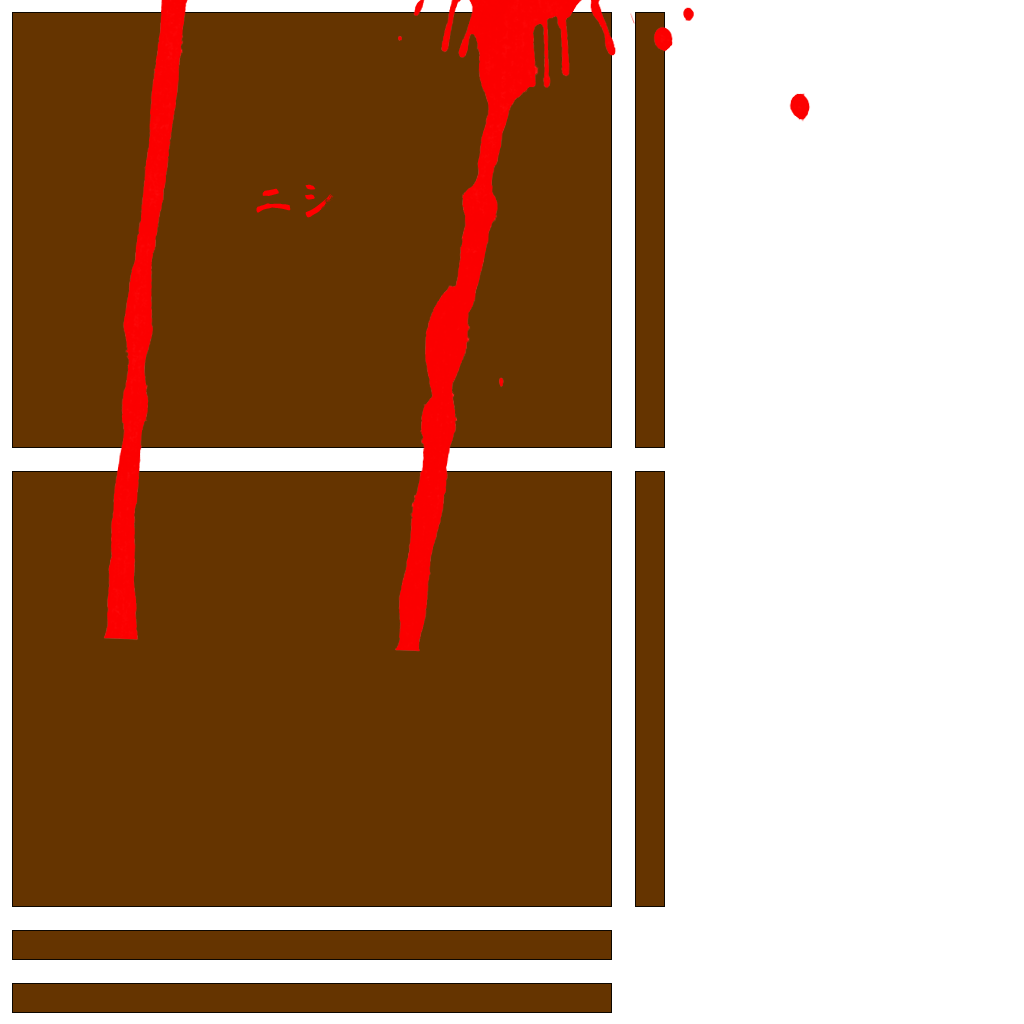
<style>
.page{position:relative;width:1024px;height:1024px;background:#653400}
.page>*{position:absolute;margin:0}
.t1{font:48px "aoyagireisyosimo2";color:#ff0000}
</style>
<div class="page">
<p class="t1" style="left:256px;top:184px;width:78px;height:34px">ニシ</p>
</div>
